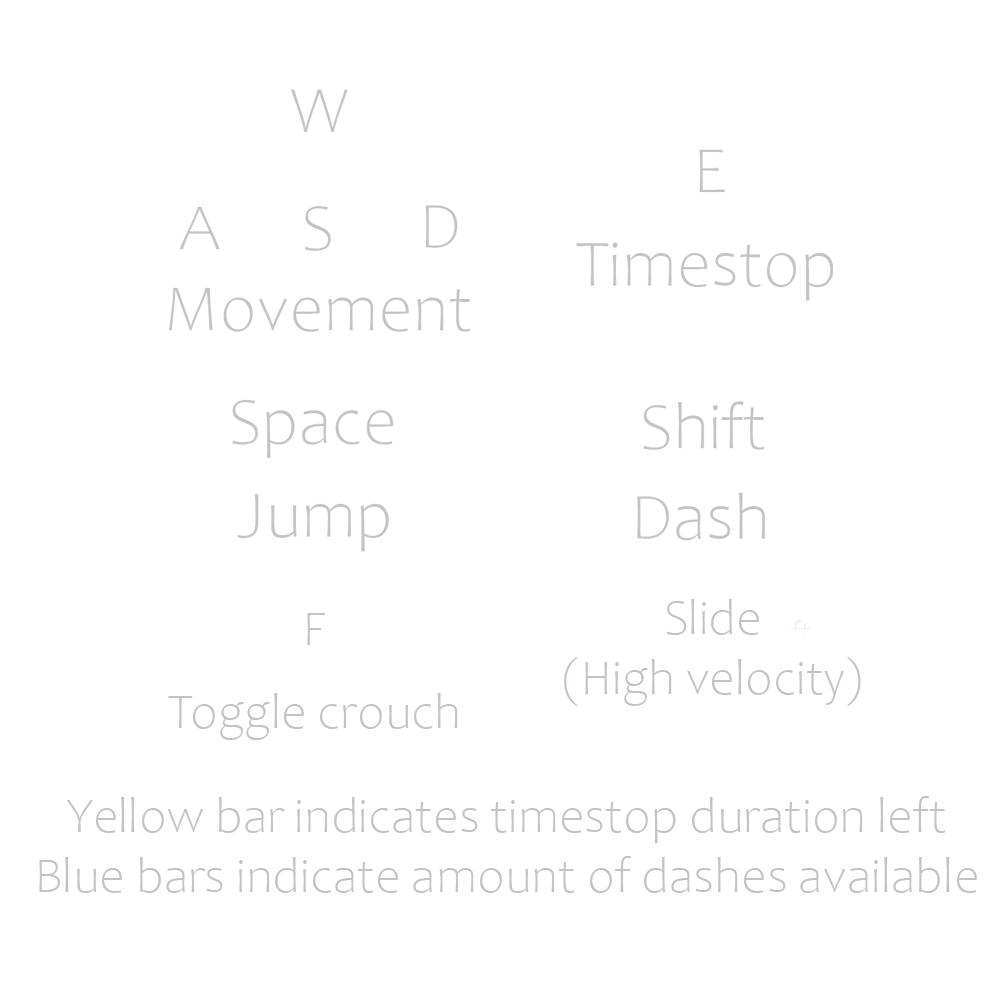
<style>
.page{position:relative;width:1000px;height:1000px;background:#ffffff}
.page>*{position:absolute;margin:0}
.t1{font:50px "Candara-Light";color:#c3c3c1}
</style>
<div class="page">
<p class="t1" style="left:564px;top:599px;width:297px;height:107px;text-align:center">Slide<br>(High velocity)</p>
<p class="t1" style="left:307px;top:613px;width:19px;height:32px">F</p>
<p class="t1" style="left:168px;top:693px;width:290px;height:47px">Toggle crouch</p>
<p class="t1" style="left:39px;top:796px;width:938px;height:97px;text-align:center">Yellow bar indicates timestop duration left<br>Blue bars indicate amount of dashes available</p>
</div>
